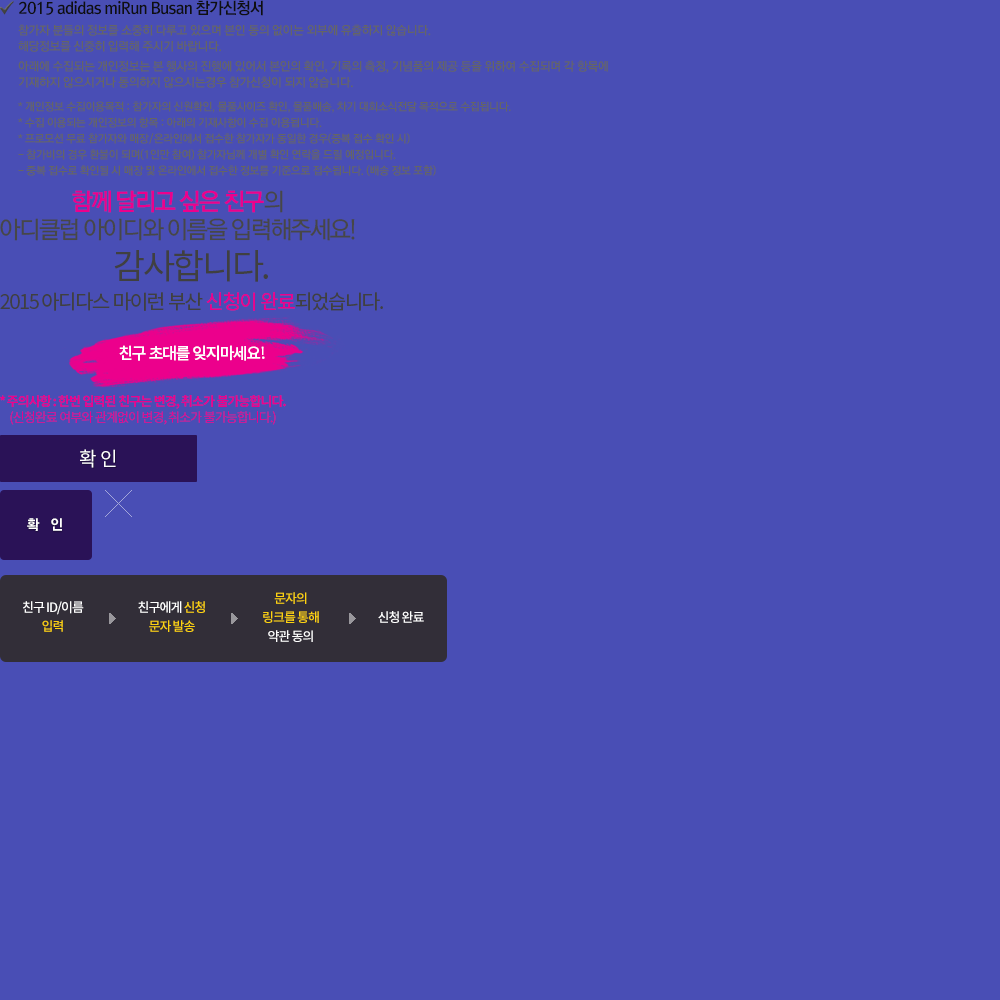
<style>
.page{position:relative;width:1000px;height:1000px;background:#494eb5}
.page>*{position:absolute;margin:0}
.t1{font:16px "RixGoB";letter-spacing:-0.05em;color:#0f0f0f}
.t2{font:11px/16px "RixGoB";letter-spacing:-0.025em;color:#656564}
.t3{font:12px/16px "RixGoB";letter-spacing:-0.025em;color:#656564}
.t4{font:12px/20px "RixGoB";letter-spacing:-0.025em;color:#656564}
.t5{font:11px/24px "RixGoB";letter-spacing:-0.025em;color:#656564}
.t6{font:24px/28px "RixGoM";letter-spacing:-0.075em;color:#474747}
.t7{font:24px/28px "RixGoB";letter-spacing:-0.075em;color:#ec008c}
.t8{font:20px/30px "NotoSansKR-Regular";letter-spacing:-0.075em;color:#404040;text-transform:uppercase}
.t9{font:35px/30px "NotoSansKR-Regular";letter-spacing:-0.075em;color:#404040;text-transform:uppercase}
.t10{font:20px/30px "NotoSansKR-Regular";letter-spacing:-0.075em;color:#ec008c;text-transform:uppercase}
.t11{font:16px "NotoSansKR-Medium";letter-spacing:-0.075em;color:#ffffff;text-transform:uppercase}
.t12{font:13px/16px "NotoSansKR-Bold";letter-spacing:-0.075em;color:#ec008c}
.t13{font:13px/16px "NotoSansKR-Regular";letter-spacing:-0.075em;color:#ec008c}
.t14{font:20px "NotoSansKR-Regular";letter-spacing:-0.05em;color:#ffffff;text-transform:uppercase;scale:0.95 1}
.t15{font:14px "RixGoEB";color:#ffffff}
.t16{font:13px/19px "NotoSansKR-Medium";letter-spacing:-0.075em;color:#fed30e}
.t17{font:13px/19px "NotoSansKR-Medium";letter-spacing:-0.075em;color:#ffffff}
.t18{font:13px "NotoSansKR-Medium";letter-spacing:-0.075em;color:#ffffff}
</style>
<div class="page">
<p class="t1" style="left:19px;top:0px;width:244px;height:16px">2015 adidas miRun Busan 참가신청서</p>
<p class="t2" style="left:18px;top:24px;width:590px;height:152px"><span class="t3">참가자 분들의 정보를 소중히 다루고 있으며 본인 동의 없이는 외부에 유출하지 않습니다.<br>해당정보를 신중히 입력해 주시기 바랍니다.<br></span><span class="t4">아래에 수집되는 개인정보는 본 행사의 진행에 있어서 본인의 확인, 기록의 측정, 기념품의 제공 등을 위하여 수집되며 각 항목에<br></span><span class="t3">기재하지 않으시거나 동의하지 않으시는경우 참가신청이 되지 않습니다. <br></span><span class="t5">* 개인정보 수집이용목적 : 참가자의 신원확인, 물품사이즈 확인, 물품배송, 차기 대회소식전달 목적으로 수집됩니다.<br></span>* 수집 이용되는 개인정보의 항목 : 아래의 기재사항이 수집 이용됩니다.<br>* 프로모션 무료 참가자와 매장/온라인에서 접수한 참가자가 동일한 경우(중복 접수 확인 시)<br>- 참가비의 경우 환불이 되며(1인만 참여) 참가자님께 개별 확인 연락을 드릴 예정입니다.<br>- 중복 접수로 확인될 시 매장 및 온라인에서 접수한 정보를 기준으로 접수됩니다. (배송 정보 포함)</p>
<p class="t6" style="left:0px;top:190px;width:355px;height:51px;text-align:center"><span class="t7">함께 달리고 싶은 친구</span>의 <br>아디클럽 아이디와 이름을 입력해주세요!</p>
<p class="t8" style="left:0px;top:250px;width:383px;height:61px;text-align:center"><span class="t9">감사합니다.<br></span>2015 아디다스 마이런 부산 <span class="t10">신청이 완료</span>되었습니다.</p>
<p class="t11" style="left:119px;top:345px;width:146px;height:16px">친구 초대를 잊지마세요!</p>
<p class="t12" style="left:0px;top:395px;width:286px;height:30px;text-align:center">* 주의사항 : 한번 입력된 친구는 변경, 취소가 불가능합니다.<br><span class="t13">(신청완료 여부와 관계없이 변경, 취소가 불가능합니다.)</span></p>
<p class="t14" style="left:80px;top:449px;width:36px;height:19px">확 인</p>
<p class="t15" style="left:27px;top:518px;width:35px;height:13px">확   인</p>
<p class="t16" style="left:263px;top:592px;width:56px;height:50px;text-align:center">문자의<br>링크를 통해<br><span class="t17">약관 동의</span></p>
<p class="t17" style="left:23px;top:601px;width:61px;height:31px;text-align:center">친구 ID/이름<br><span class="t16">입력</span></p>
<p class="t16" style="left:138px;top:601px;width:67px;height:31px;text-align:center"><span class="t17">친구에게 </span>신청<br>문자 발송</p>
<p class="t18" style="left:378px;top:611px;width:46px;height:12px">신청 완료</p>
</div>
